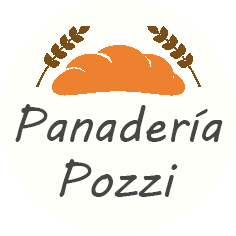
<style>
.page{position:relative;width:236px;height:236px;background:#fffffa}
.page>*{position:absolute;margin:0}
.t1{font:48px "MVBoli";color:#464646}
</style>
<div class="page">
<p class="t1" style="left:15px;top:104px;width:208px;height:38px">Panadería</p>
<p class="t1" style="left:59px;top:159px;width:119px;height:38px">Pozzi</p>
</div>
